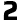
<style>
.page{position:relative;width:20px;height:20px;background:#ffffff}
.page>*{position:absolute;margin:0}
.t1{font:26px "Saira-Bold";color:#000000}
</style>
<div class="page">
<p class="t1" style="left:3px;top:1px;width:14px;height:19px">2</p>
</div>
